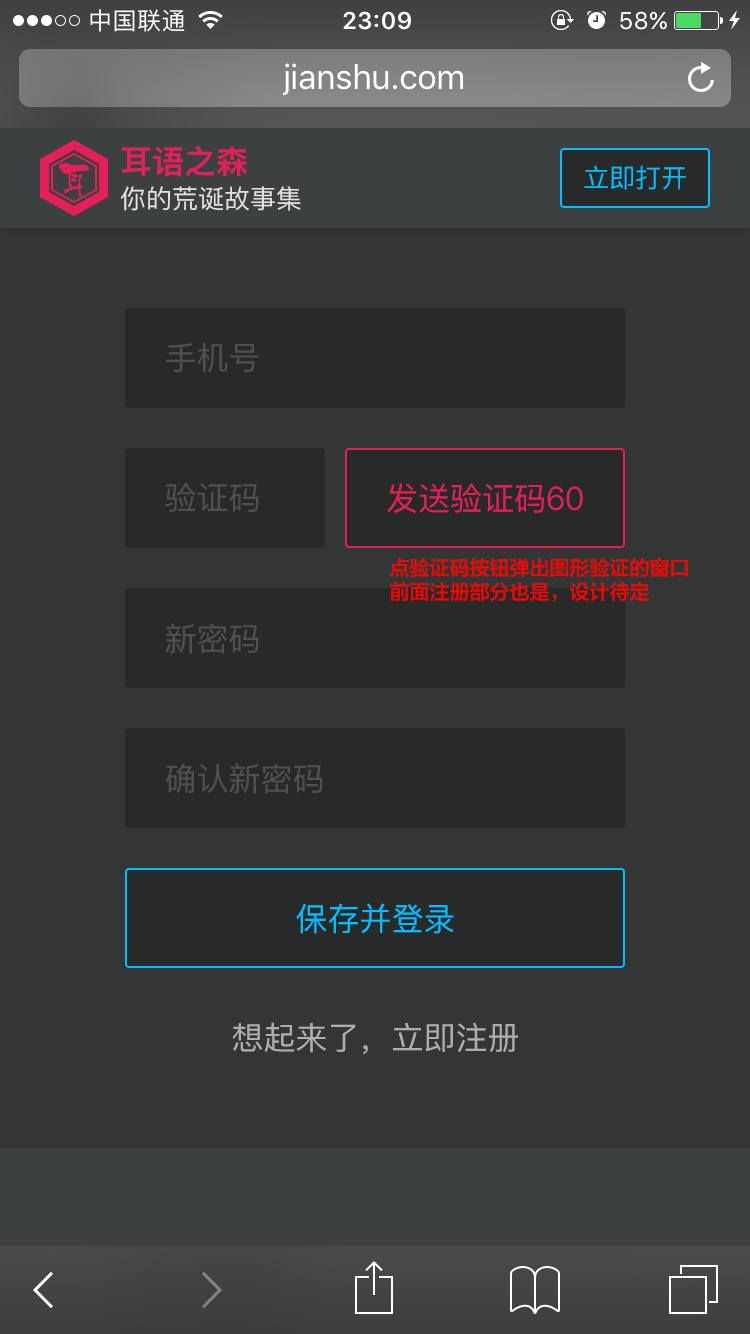
<style>
.page{position:relative;width:750px;height:1334px;background:#343636}
.page>*{position:absolute;margin:0}
.t1{font:32px "PingFangSC-Semibold";color:#e61e5a}
.t2{font:26px "PingFangSC-Regular";color:#00beff}
.t3{font:26px "PingFangSC-Regular";color:#e1e1e1}
.t4{font:32px "PingFangSC-Regular";color:#505050}
.t5{font:32px "PingFangSC-Regular";color:#e61e5a}
.t6{font:20px "FZLTZHK--GBK1-0";color:#ff0000}
.t7{font:32px "PingFangSC-Regular";color:#00beff}
.t8{font:32px "PingFangSC-Regular";color:#aeaeae}
</style>
<div class="page">
<p class="t1" style="left:121px;top:146px;width:126px;height:31px">耳语之森</p>
<p class="t2" style="left:584px;top:165px;width:102px;height:25px">立即打开</p>
<p class="t3" style="left:121px;top:186px;width:180px;height:25px">你的荒诞故事集</p>
<p class="t4" style="left:166px;top:343px;width:93px;height:30px">手机号</p>
<p class="t4" style="left:165px;top:483px;width:94px;height:29px">验证码</p>
<p class="t5" style="left:387px;top:483px;width:196px;height:30px">发送验证码60</p>
<p class="t6" style="left:390px;top:558px;width:298px;height:44px">点验证码按钮弹出图形验证的窗口<br>前面注册部分也是，设计待定</p>
<p class="t4" style="left:165px;top:623px;width:94px;height:31px">新密码</p>
<p class="t4" style="left:165px;top:763px;width:158px;height:31px">确认新密码</p>
<p class="t7" style="left:296px;top:903px;width:158px;height:31px">保存并登录</p>
<p class="t8" style="left:232px;top:1022px;width:286px;height:33px">想起来了，立即注册</p>
</div>
